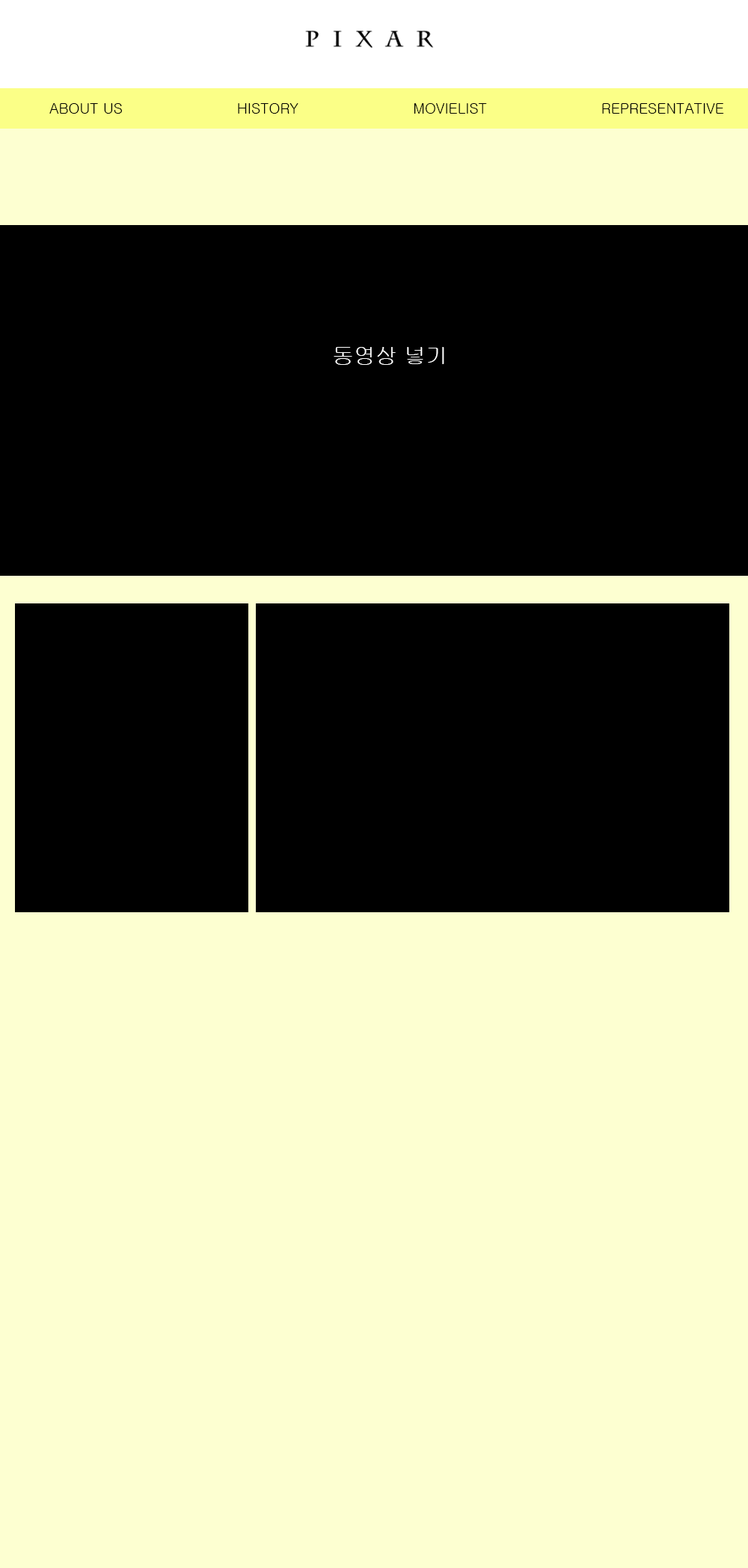
<style>
.page{position:relative;width:748px;height:1568px;background:#fdffd1}
.page>*{position:absolute;margin:0}
.t1{font:14.5px "Gulim";color:#000000;text-transform:uppercase}
.t2{font:14.5px "Gulim";color:#000000}
.t3{font:21.7px "Gulim";color:#ffffff;text-transform:uppercase}
</style>
<div class="page">
<p class="t1" style="left:49px;top:103px;width:73px;height:11px"><span class="t2">AB</span>out us</p>
<p class="t2" style="left:238px;top:103px;width:60px;height:11px">HISTORY</p>
<p class="t2" style="left:413px;top:103px;width:74px;height:11px">MOVIELIST</p>
<p class="t1" style="left:602px;top:103px;width:122px;height:11px">representative</p>
<p class="t3" style="left:333px;top:347px;width:111px;height:18px">동영상 넣기</p>
</div>
